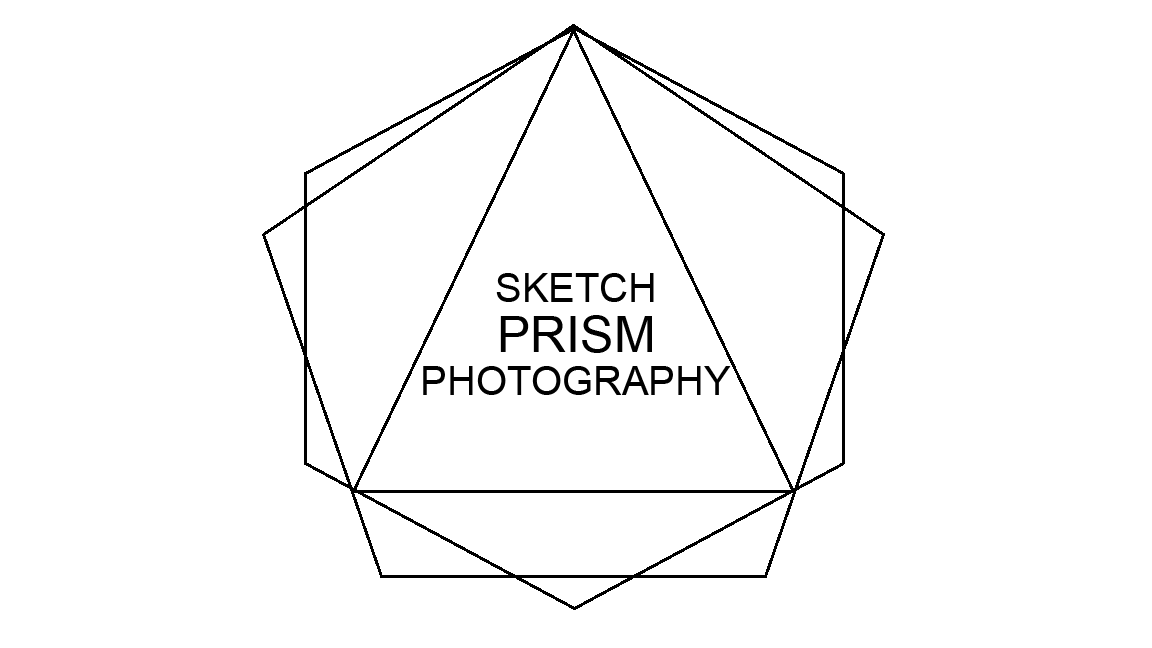
<style>
.page{position:relative;width:1152px;height:648px;background:#ffffff}
.page>*{position:absolute;margin:0}
.t1{font:40px "ArialMT";color:#000000}
.t2{font:50px "ArialMT";color:#000000}
</style>
<div class="page">
<p class="t1" style="left:496px;top:273px;width:158px;height:29px">SKETCH</p>
<p class="t2" style="left:500px;top:315px;width:152px;height:38px">PRISM</p>
<p class="t1" style="left:423px;top:366px;width:308px;height:29px">PHOTOGRAPHY</p>
</div>
